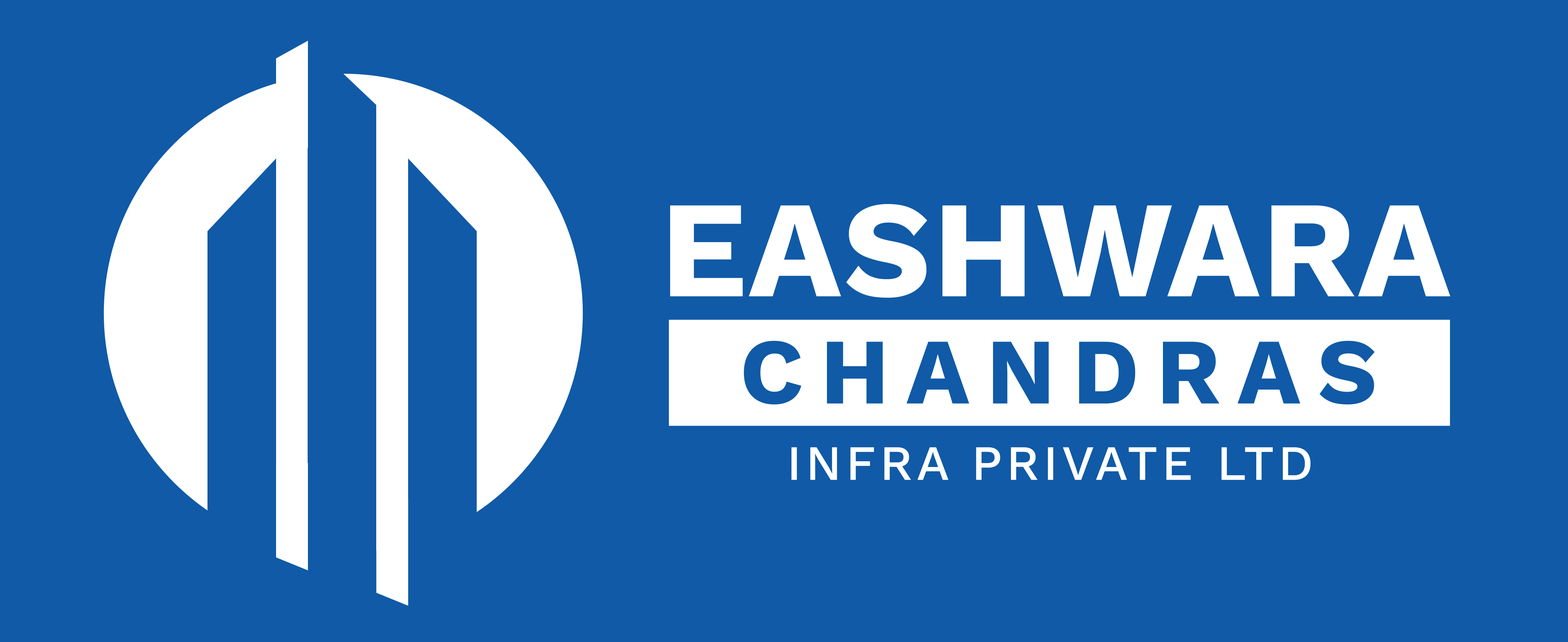
<style>
.page{position:relative;width:1568px;height:642px;background:#105aa7}
.page>*{position:absolute;margin:0}
.t1{font:137.6px "WorkSans-Bold";letter-spacing:0.01em;color:#ffffff;text-transform:uppercase}
.t2{font:93.4px "WorkSans-Bold";letter-spacing:0.18em;color:#105aa7;text-transform:uppercase}
.t3{font:49.2px "WorkSans-Medium";letter-spacing:0.08em;color:#ffffff;text-transform:uppercase}
</style>
<div class="page">
<p class="t1" style="left:670px;top:204px;width:780px;height:94px">Eashwara</p>
<p class="t2" style="left:744px;top:341px;width:631px;height:64px">chandras</p>
<p class="t3" style="left:791px;top:447px;width:520px;height:33px">Infra Private Ltd</p>
</div>
